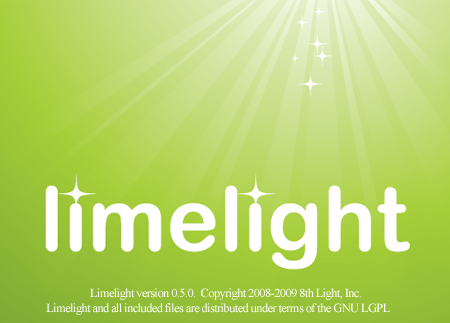
<style>
.page{position:relative;width:450px;height:323px}
.page>*{position:absolute;margin:0}
.t1{font:12.5px "TimesNewRomanPSMT";letter-spacing:-0.05em;color:#ffffff}
</style>
<div class="page">
<p class="t1" style="left:46px;top:288px;width:344px;height:27px;text-align:center">Limelight version 0.5.0.  Copyright 2008-2009 8th Light, Inc.<br>Limelight and all included files are distributed under terms of the GNU LGPL</p>
</div>
